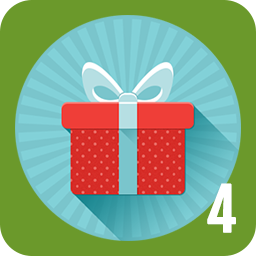
<style>
.page{position:relative;width:256px;height:256px;background:#6b992b}
.page>*{position:absolute;margin:0}
.t1{font:56.9px "FjallaOne-Regular";letter-spacing:-0.03em;color:#ffffff;text-transform:uppercase;font-weight:bold}
</style>
<div class="page">
<p class="t1" style="left:207px;top:183px;width:29px;height:50px">4</p>
</div>
